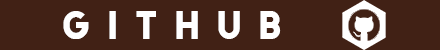
<style>
.page{position:relative;width:440px;height:50px;background:#412115}
.page>*{position:absolute;margin:0}
.t1{font:37.5px "TheNextFont";letter-spacing:0.48em;color:#ffffff}
</style>
<div class="page">
<p class="t1" style="left:63px;top:11px;width:218px;height:28px">GITHUB</p>
</div>
